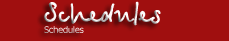
<style>
.page{position:relative;width:229px;height:41px;background:#a00f0f}
.page>*{position:absolute;margin:0}
.t1{font:30px "BetinaScriptBold"}
.t2{font:9px "Tahoma"}
</style>
<div class="page">
<p class="t1" style="left:44px;top:1px;width:117px;height:32px">Schedules<br><span class="t2">Schedules</span></p>
</div>
